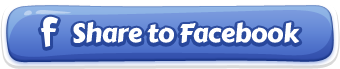
<style>
.page{position:relative;width:340px;height:69px}
.page>*{position:absolute;margin:0}
.t1{font:26px "CarterOne";letter-spacing:-0.02em;color:#ffffff}
</style>
<div class="page">
<p class="t1" style="left:73px;top:21px;width:227px;height:22px">Share to Facebook</p>
</div>
